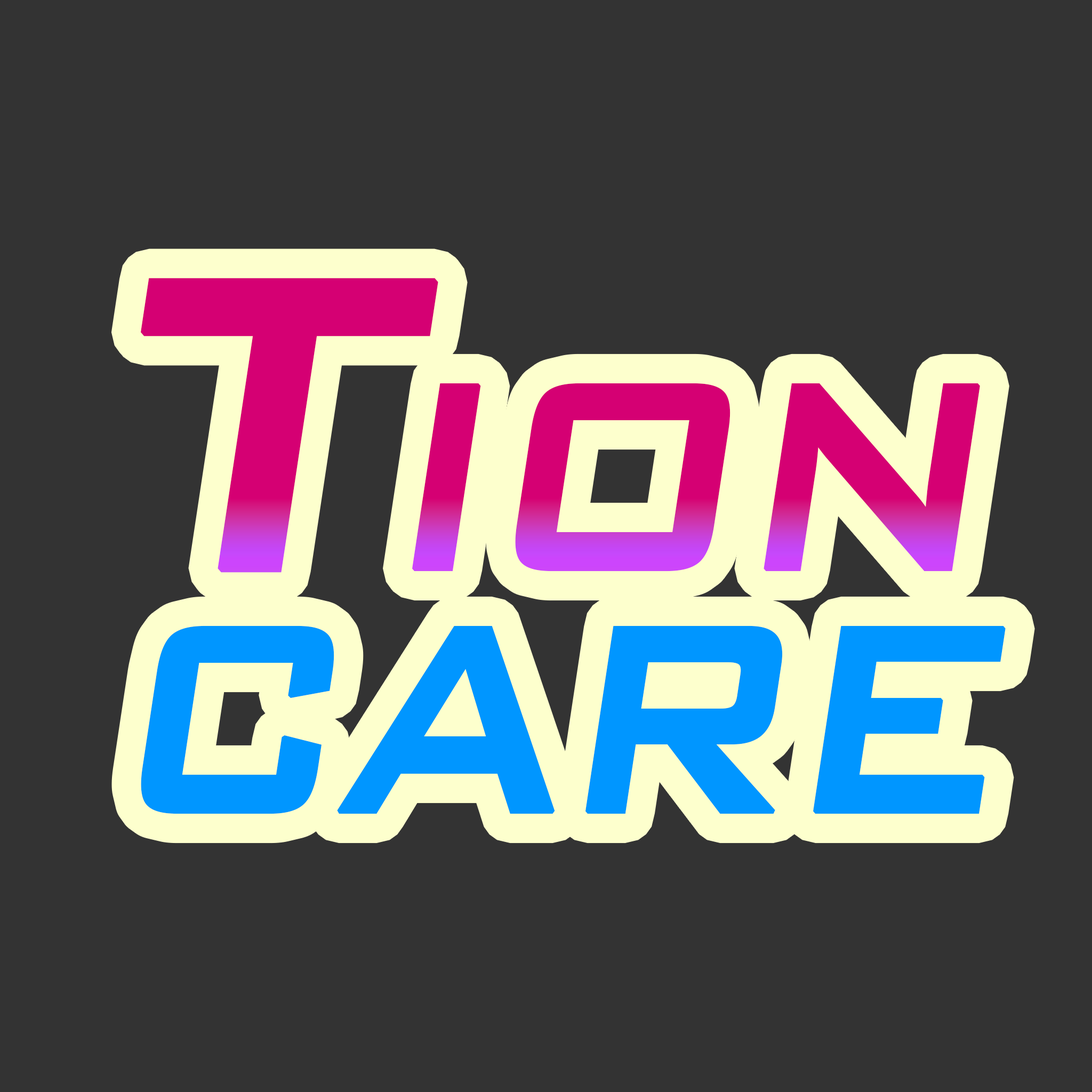
<style>
.page{position:relative;width:1092px;height:1092px;background:#333333}
.page>*{position:absolute;margin:0}
.t1{font:355.1px/242.8px "BankGothicBT-Medium";letter-spacing:-0.08em;font-weight:bold;font-style:italic;scale:0.85 1}
.t2{font:556.5px/242.8px "BankGothicBT-Medium";letter-spacing:-0.08em;font-weight:bold;font-style:italic;scale:0.85 1}
</style>
<div class="page">
<p class="t1" style="left:140px;top:278px;width:866px;height:536px"><span class="t2">T</span>ION<br>CARE</p>
</div>
